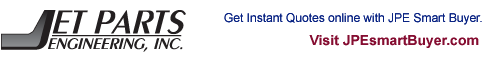
<style>
.page{position:relative;width:500px;height:60px;background:#ffffff}
.page>*{position:absolute;margin:0}
.t1{font:12px "ArialMT";color:#092383}
.t2{font:14px "Arial-BoldMT";color:#850d31}
</style>
<div class="page">
<p class="t1" style="left:224px;top:13px;width:258px;height:12px">Get Instant Quotes online with JPE Smart Buyer.</p>
<p class="t2" style="left:309px;top:35px;width:170px;height:13px">Visit JPEsmartBuyer.com</p>
</div>
